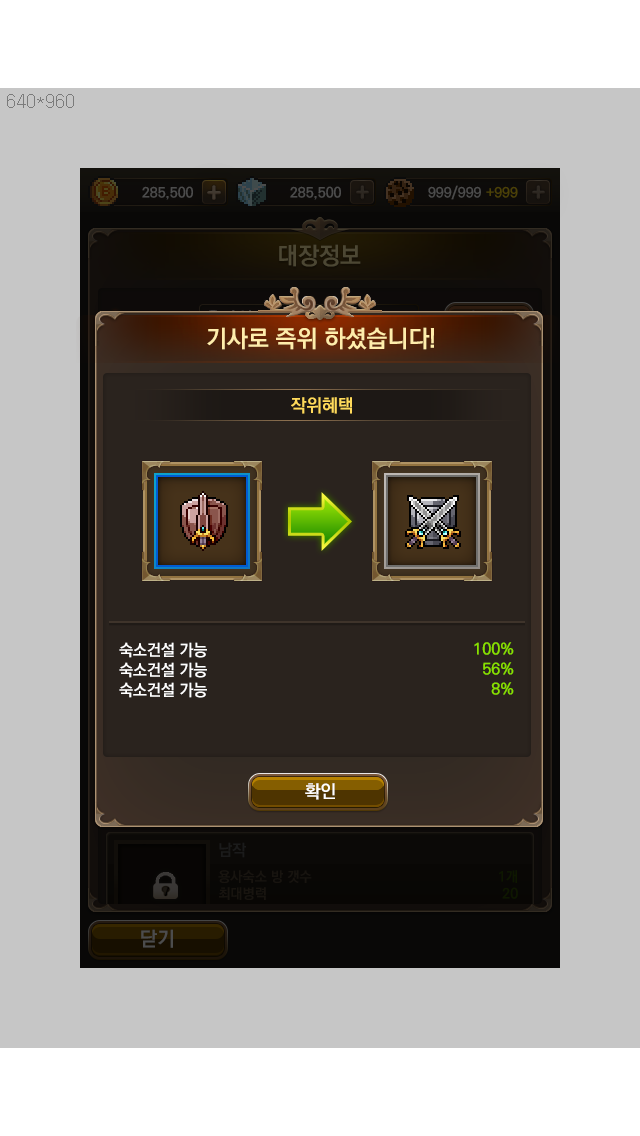
<style>
.page{position:relative;width:640px;height:1136px;background:#c6c6c6}
.page>*{position:absolute;margin:0}
.t1{font:24px "KoPubDotumBold";color:#ffedab}
.t2{font:18px "KoPubDotumBold";color:#ffda5b}
.t3{font:16px/20px "KoPubDotumBold";color:#ffffff}
.t4{font:16px/20px "KoPubDotumBold";color:#88e000}
</style>
<div class="page">
<p class="t1" style="left:207px;top:327px;width:227px;height:23px">기사로 즉위 하셨습니다!</p>
<p class="t2" style="left:291px;top:397px;width:61px;height:17px">작위혜택</p>
<p class="t3" style="left:119px;top:642px;width:88px;height:56px">숙소건설 가능<br>숙소건설 가능<br>숙소건설 가능</p>
<p class="t4" style="left:474px;top:642px;width:40px;height:53px;text-align:right">100%<br>56%<br>8%</p>
</div>
